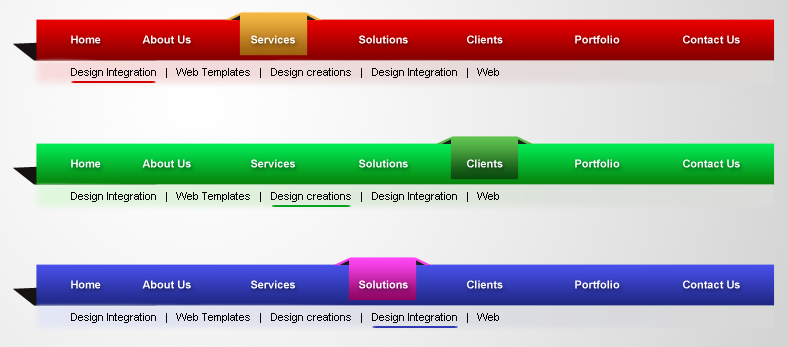
<style>
.page{position:relative;width:788px;height:347px}
.page>*{position:absolute;margin:0}
.t1{font:11px "Arial-BoldMT";color:#ffffff}
.t2{font:11px "ArialMT";color:#000000}
</style>
<div class="page">
<p class="t1" style="left:71px;top:35px;width:669px;height:9px">Home  About Us  Services  Solutions  Clients  Portfolio  Contact Us</p>
<p class="t2" style="left:71px;top:68px;width:428px;height:10px">Design Integration   |   Web Templates   |   Design creations   |   Design Integration   |   Web</p>
<p class="t1" style="left:71px;top:159px;width:669px;height:9px">Home  About Us  Services  Solutions  Clients  Portfolio  Contact Us</p>
<p class="t2" style="left:71px;top:192px;width:428px;height:10px">Design Integration   |   Web Templates   |   Design creations   |   Design Integration   |   Web</p>
<p class="t1" style="left:71px;top:280px;width:669px;height:9px">Home  About Us  Services  Solutions  Clients  Portfolio  Contact Us</p>
<p class="t2" style="left:71px;top:313px;width:428px;height:10px">Design Integration   |   Web Templates   |   Design creations   |   Design Integration   |   Web</p>
</div>
